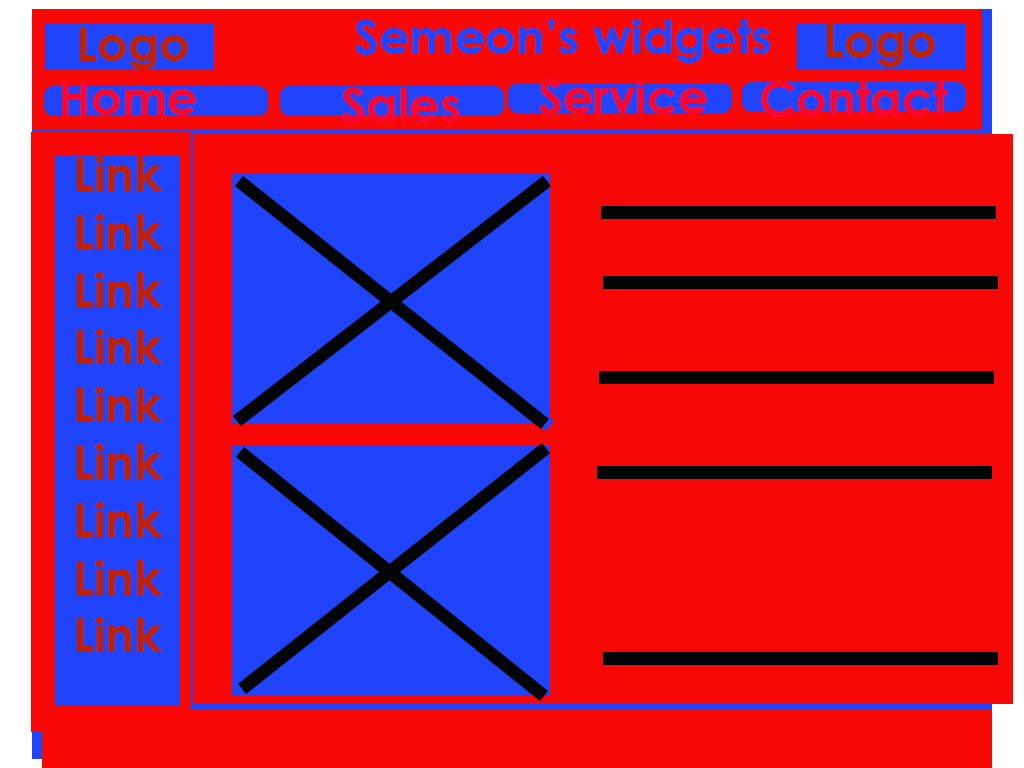
<style>
.page{position:relative;width:1024px;height:768px;background:#f80707}
.page>*{position:absolute;margin:0}
.t1{font:48px "CenturyGothic-Bold";color:#c12000}
.t2{font:48px "CenturyGothic-Bold";color:#2044fb}
.t3{font:48px "CenturyGothic-Bold";color:#fa062f}
</style>
<div class="page">
<p class="t1" style="left:80px;top:27px;width:108px;height:43px">Logo</p>
<p class="t2" style="left:355px;top:19px;width:416px;height:44px">Semeon’s widgets</p>
<p class="t1" style="left:827px;top:24px;width:108px;height:43px">Logo</p>
<p class="t3" style="left:62px;top:81px;width:134px;height:34px">Home</p>
<p class="t3" style="left:342px;top:87px;width:118px;height:36px">Sales</p>
<p class="t3" style="left:539px;top:79px;width:168px;height:36px">Service</p>
<p class="t3" style="left:761px;top:81px;width:187px;height:36px">Contact</p>
<p class="t1" style="left:77px;top:156px;width:86px;height:496px;text-align:center">Link<br>Link<br>Link<br>Link<br>Link<br>Link<br>Link<br>Link<br>Link</p>
</div>
